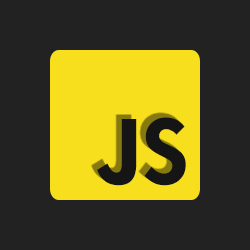
<style>
.page{position:relative;width:250px;height:250px;background:#222222}
.page>*{position:absolute;margin:0}
.t1{font:84px "Geometric212BT-HeavyCondensed";color:#222222;text-transform:uppercase}
</style>
<div class="page">
<p class="t1" style="left:97px;top:117px;width:89px;height:69px">JS</p>
</div>
